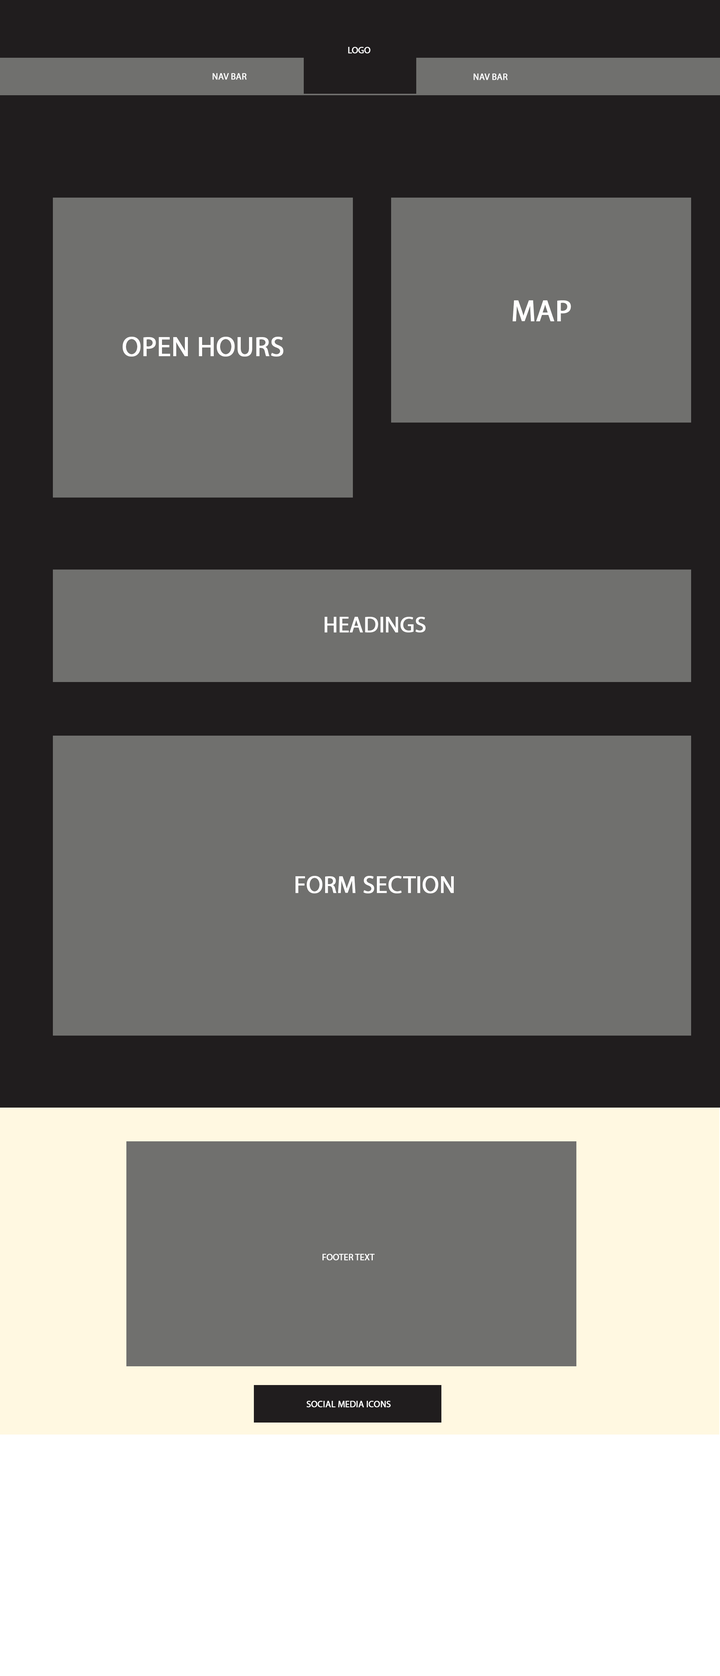
<style>
.page{position:relative;width:720px;height:1676px;background:#70706e}
.page>*{position:absolute;margin:0}
.t1{font:9px "MyriadPro-Regular";letter-spacing:-0.003em;color:#ffffff;font-weight:bold}
.t2{font:9px "MyriadPro-Regular";letter-spacing:-0.003em;color:#fefefe;font-weight:bold}
.t3{font:30.4px "MyriadPro-Regular";letter-spacing:-0.003em;color:#fffefe;font-weight:bold}
.t4{font:27.9px "MyriadPro-Regular";letter-spacing:-0.003em;color:#fffefe;font-weight:bold}
.t5{font:22.2px "MyriadPro-Regular";letter-spacing:-0.003em;color:#fffefe;font-weight:bold}
.t6{font:24.2px "MyriadPro-Regular";letter-spacing:-0.003em;color:#fffefe;font-weight:bold}
</style>
<div class="page">
<p class="t1" style="left:348px;top:47px;width:22px;height:7px">LOGO</p>
<p class="t2" style="left:213px;top:73px;width:34px;height:7px">NAV BAR</p>
<p class="t2" style="left:474px;top:74px;width:34px;height:6px">NAV BAR</p>
<p class="t3" style="left:513px;top:300px;width:58px;height:21px">MAP</p>
<p class="t4" style="left:123px;top:337px;width:161px;height:20px">OPEN HOURS</p>
<p class="t5" style="left:324px;top:617px;width:102px;height:16px">HEADINGS</p>
<p class="t6" style="left:296px;top:876px;width:158px;height:18px">FORM SECTION</p>
<p class="t1" style="left:322px;top:1254px;width:53px;height:7px">FOOTER TEXT</p>
<p class="t1" style="left:306px;top:1401px;width:85px;height:7px">SOCIAL MEDIA ICONS</p>
</div>
